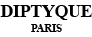
<style>
.page{position:relative;width:92px;height:37px;background:#ffffff}
.page>*{position:absolute;margin:0}
.t1{font:18px/86px "TimesNewRomanPS-BoldMT";letter-spacing:-0.012em;color:#000000}
.t2{font:11px/15px "TimesNewRomanPS-BoldMT";letter-spacing:-0.012em;color:#000000}
</style>
<div class="page">
<p class="t1" style="left:0px;top:5px;width:92px;height:27px;text-align:center">DIPTYQUE<br><span class="t2">PARIS</span></p>
</div>
